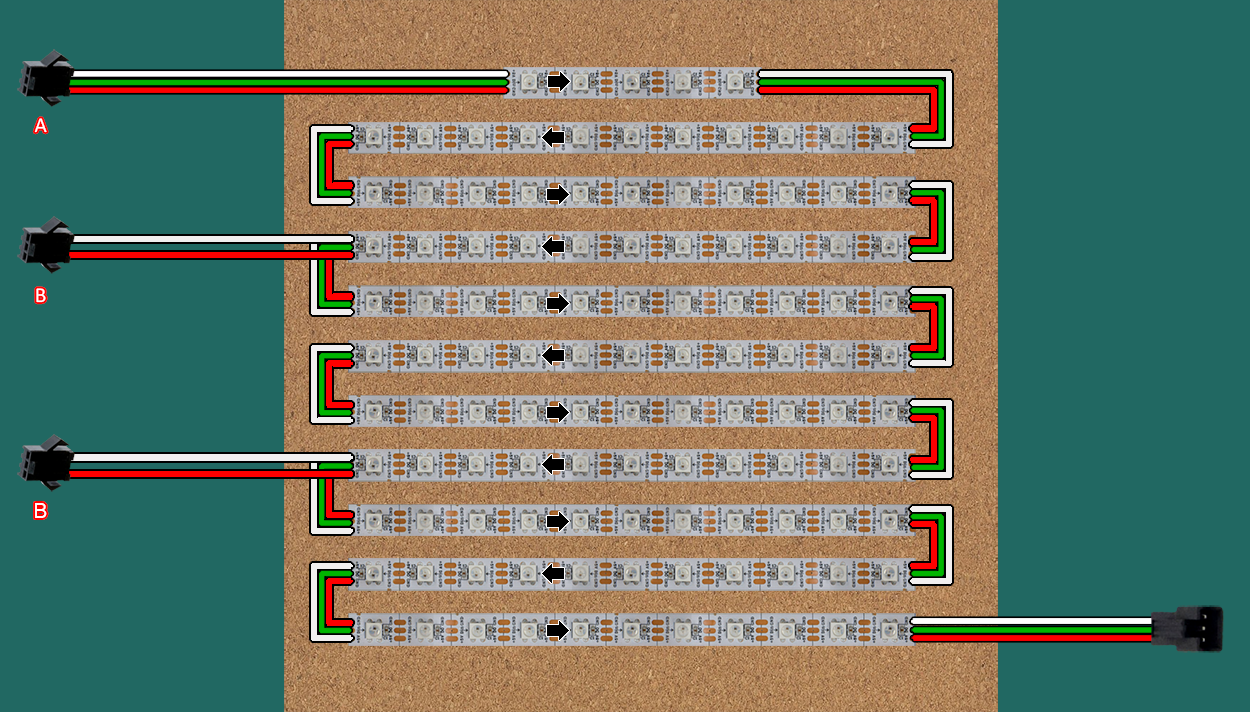
<style>
.page{position:relative;width:1250px;height:712px;background:#216862}
.page>*{position:absolute;margin:0}
.t1{font:21.2px "Calibri";color:#ffffff}
.t2{font:21.2px "ArialMT";color:#ffffff}
</style>
<div class="page">
<p class="t1" style="left:34px;top:118px;width:13px;height:15px">A</p>
<p class="t1" style="left:36px;top:288px;width:10px;height:15px">B</p>
<p class="t2" style="left:35px;top:503px;width:12px;height:15px">B</p>
</div>
